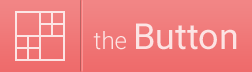
<style>
.page{position:relative;width:252px;height:72px}
.page>*{position:absolute;margin:0}
.t1{font:36px "Roboto-Regular";color:#fce4e4}
.t2{font:24px "Roboto-Light";color:#fce4e4}
</style>
<div class="page">
<p class="t1" style="left:93px;top:23px;width:144px;height:27px"><span class="t2">the </span>Button</p>
</div>
